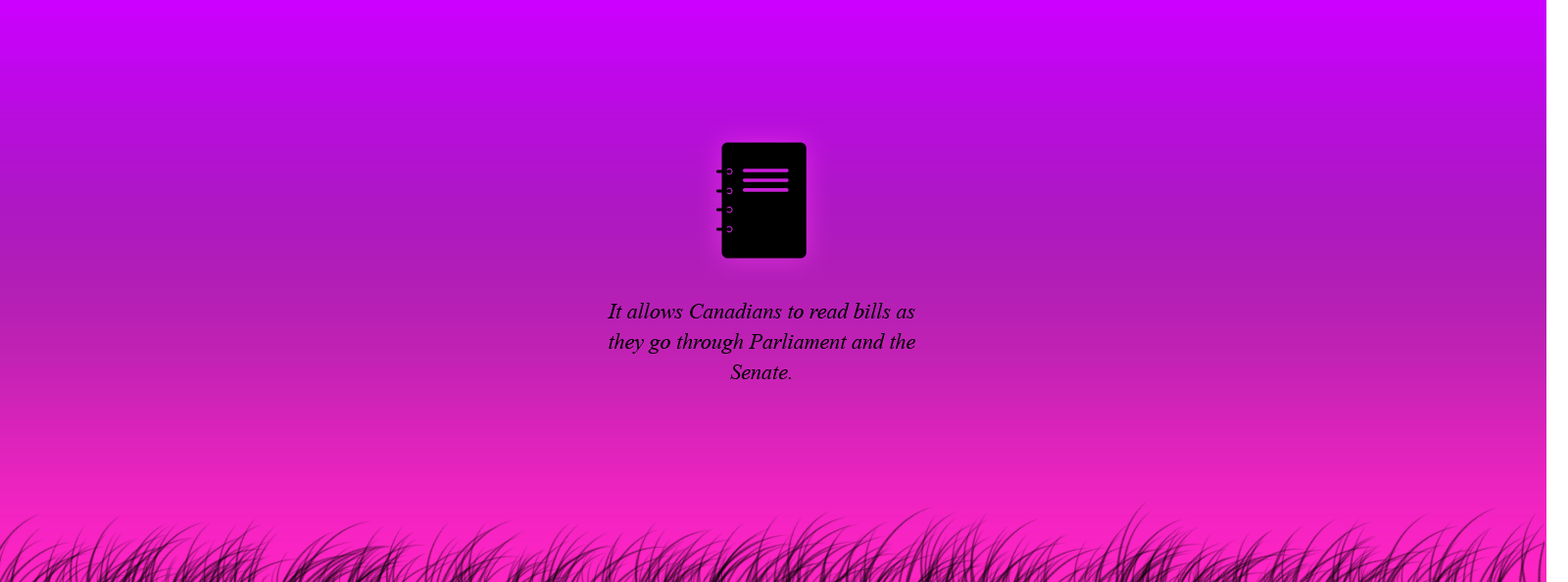
<style>
.page{position:relative;width:1568px;height:582px}
.page>*{position:absolute;margin:0}
.t1{font:21.6px/30.4px "TimesNewRomanPS-ItalicMT";color:#000000}
</style>
<div class="page">
<p class="t1" style="left:608px;top:303px;width:307px;height:76px;text-align:center">It allows Canadians to read bills as they go through Parliament and the Senate.</p>
</div>
